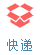
<style>
.page{position:relative;width:40px;height:55px;background:#ffffff}
.page>*{position:absolute;margin:0}
.t1{font:22.5px "SimSun";letter-spacing:0.1em;color:#4788b2;font-variant:small-caps}
</style>
<div class="page">
<p class="t1" style="left:7px;top:39px;width:25px;height:12px">快递</p>
</div>
